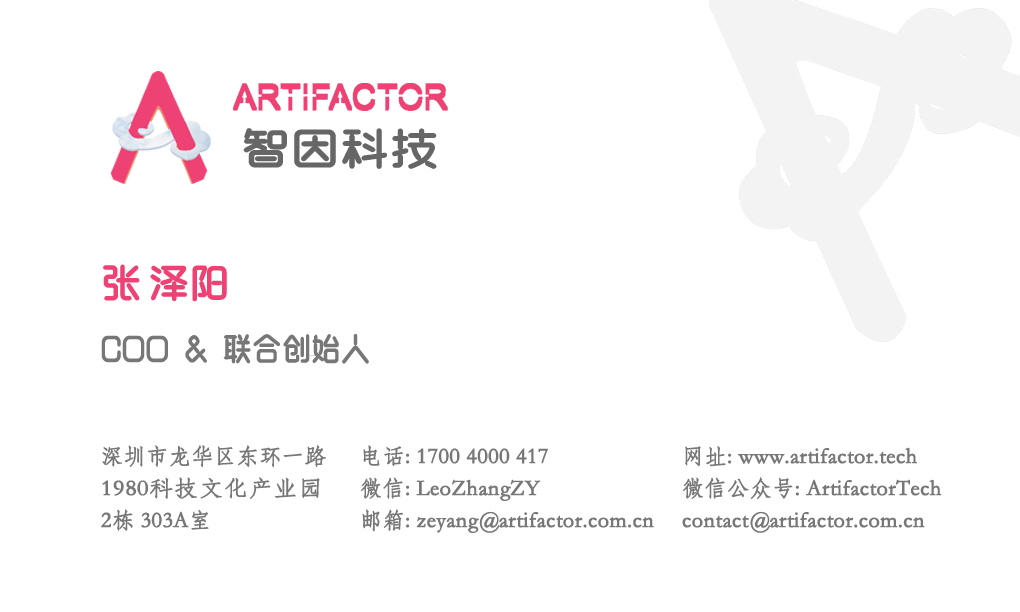
<style>
.page{position:relative;width:1020px;height:612px;background:#ffffff}
.page>*{position:absolute;margin:0}
.t1{font:44px "BENMOXuyuan";color:#666666;font-weight:bold;scale:1.1 1}
.t2{font:32px "BENMOXuyuan";color:#777777;font-weight:bold;scale:0.9 1}
.t3{font:40px "BENMOXuyuan";color:#ee4274;font-weight:bold}
.t4{font:22px/32px "STFangsong";color:#777777;font-weight:bold;scale:1.1 1}
.t5{font:22px/32px "STFangsong";color:#777777;font-weight:bold}
</style>
<div class="page">
<p class="t1" style="left:243px;top:128px;width:194px;height:41px">智因科技</p>
<p class="t2" style="left:101px;top:264px;width:268px;height:100px"><span class="t3">张 泽阳<br></span>COO &amp; 联合创始人</p>
<p class="t4" style="left:101px;top:445px;width:225px;height:86px"><span class="t5">深圳市龙华区东环一路<br></span>1980科技文化产业园<br><span class="t5">2栋 303A室</span></p>
<p class="t5" style="left:360px;top:445px;width:294px;height:88px">电话: 1700 4000 417<br>微信: LeoZhangZY<br>邮箱: zeyang@artifactor.com.cn</p>
<p class="t5" style="left:682px;top:446px;width:260px;height:87px">网址: www.artifactor.tech<br>微信公众号: ArtifactorTech<br>contact@artifactor.com.cn</p>
</div>
